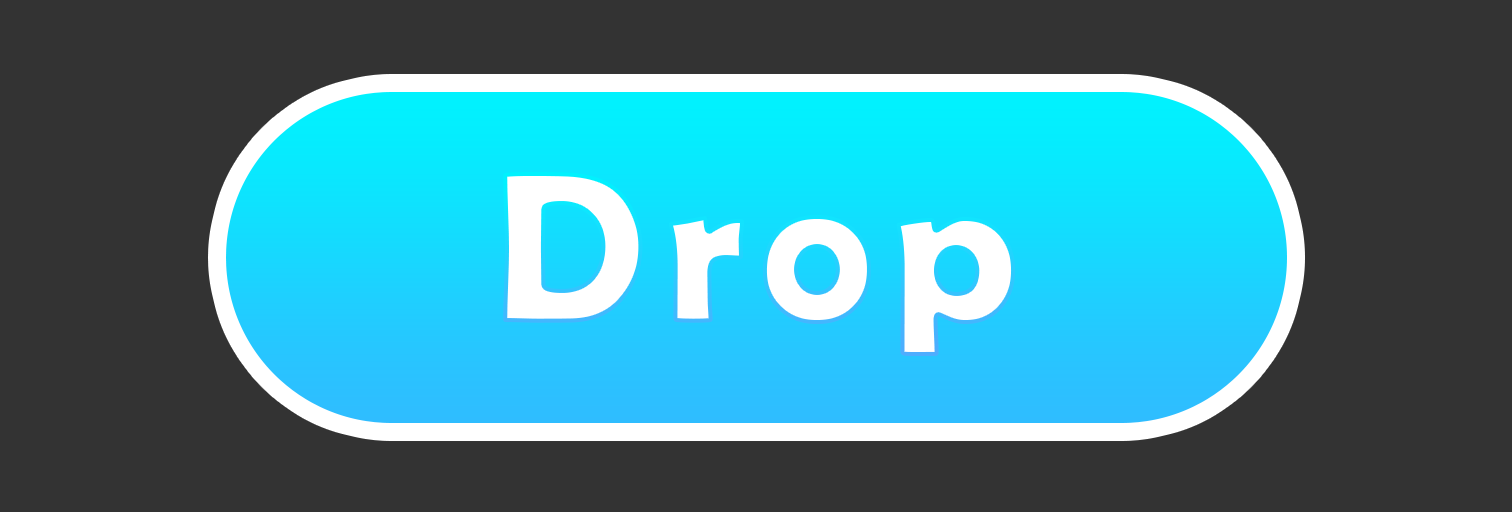
<style>
.page{position:relative;width:1512px;height:512px;background:#333333}
.page>*{position:absolute;margin:0}
.t1{font:218.9px "BerlinSansFBDemi-Bold";letter-spacing:0.06em;color:#ffffff}
</style>
<div class="page">
<p class="t1" style="left:503px;top:172px;width:513px;height:184px">Drop</p>
</div>
